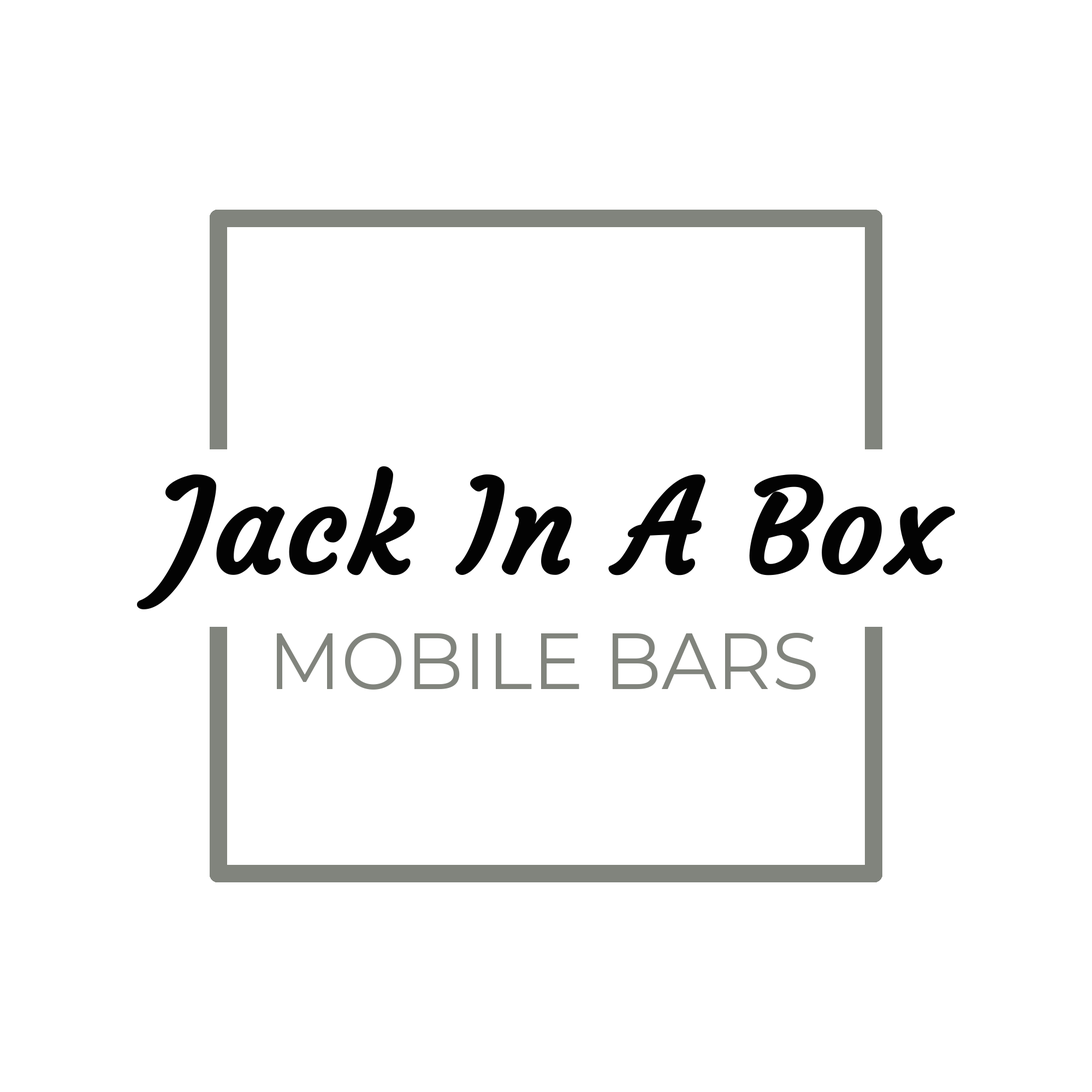
<style>
.page{position:relative;width:1092px;height:1092px;background:#ffffff}
.page>*{position:absolute;margin:0}
.t1{font:218.4px "Courgette-Regular";color:#030303;font-weight:bold}
.t2{font:136.5px "Montserrat-Regular";color:#81847d;scale:0.97 1}
</style>
<div class="page">
<p class="t1" style="left:136px;top:466px;width:819px;height:143px">Jack In A Box</p>
<p class="t2" style="left:277px;top:633px;width:539px;height:57px">MOBILE BARS</p>
</div>
